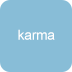
<style>
.page{position:relative;width:72px;height:72px;background:#88bdd7}
.page>*{position:absolute;margin:0}
.t1{font:14px "ArialMT";letter-spacing:-0.025em;color:#ffffff}
</style>
<div class="page">
<p class="t1" style="left:18px;top:29px;width:37px;height:11px">karma</p>
</div>
